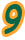
<style>
.page{position:relative;width:25px;height:40px;background:#ffffff}
.page>*{position:absolute;margin:0}
.t1{font:37.5px "ComicSansMS-Bold";color:#0b6747;font-style:italic;scale:0.8 1}
</style>
<div class="page">
<p class="t1" style="left:4px;top:4px;width:18px;height:30px">9</p>
</div>
